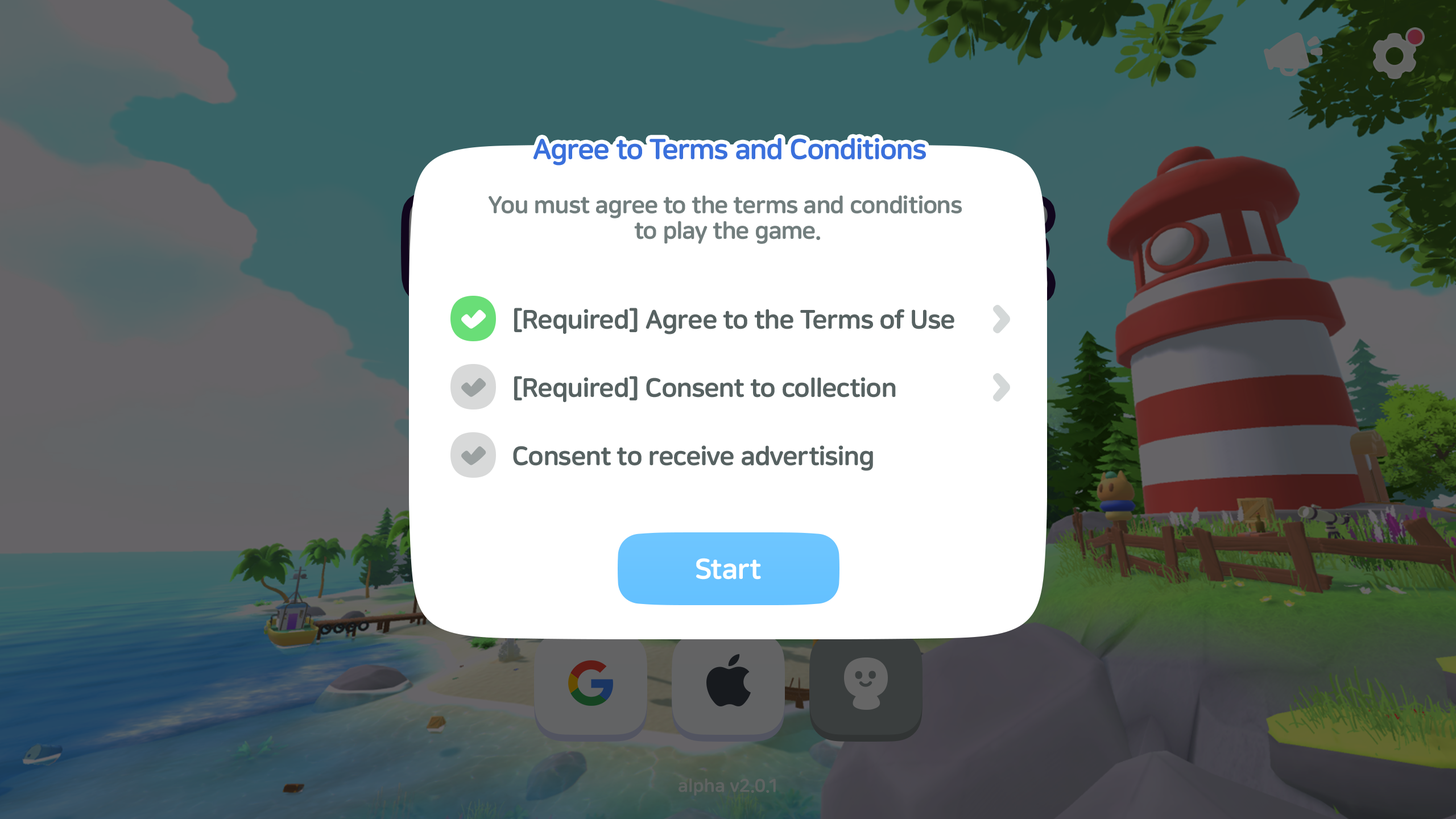
<style>
.page{position:relative;width:1456px;height:819px;background:#ffffff}
.page>*{position:absolute;margin:0}
.t1{font:28.4px "NanumSquareRoundEB";letter-spacing:-0.02em;color:#3a70dc}
.t2{font:23.9px/25.6px "NanumSquareRoundEB";letter-spacing:-0.02em;color:#727e7e}
.t3{font:26.2px "NanumSquareRoundEB";letter-spacing:-0.02em;color:#576262}
.t4{font:28.4px "NanumSquareRoundEB";letter-spacing:-0.02em;color:#ffffff}
</style>
<div class="page">
<p class="t1" style="left:533px;top:138px;width:393px;height:28px">Agree to Terms and Conditions</p>
<p class="t2" style="left:489px;top:195px;width:473px;height:49px;text-align:center">You must agree to the terms and conditions <br>to play the game.</p>
<p class="t3" style="left:514px;top:308px;width:440px;height:26px">[Required] Agree to the Terms of Use</p>
<p class="t3" style="left:514px;top:376px;width:382px;height:26px">[Required] Consent to collection</p>
<p class="t3" style="left:513px;top:445px;width:360px;height:26px">Consent to receive advertising</p>
<p class="t4" style="left:696px;top:558px;width:65px;height:22px">Start</p>
</div>
